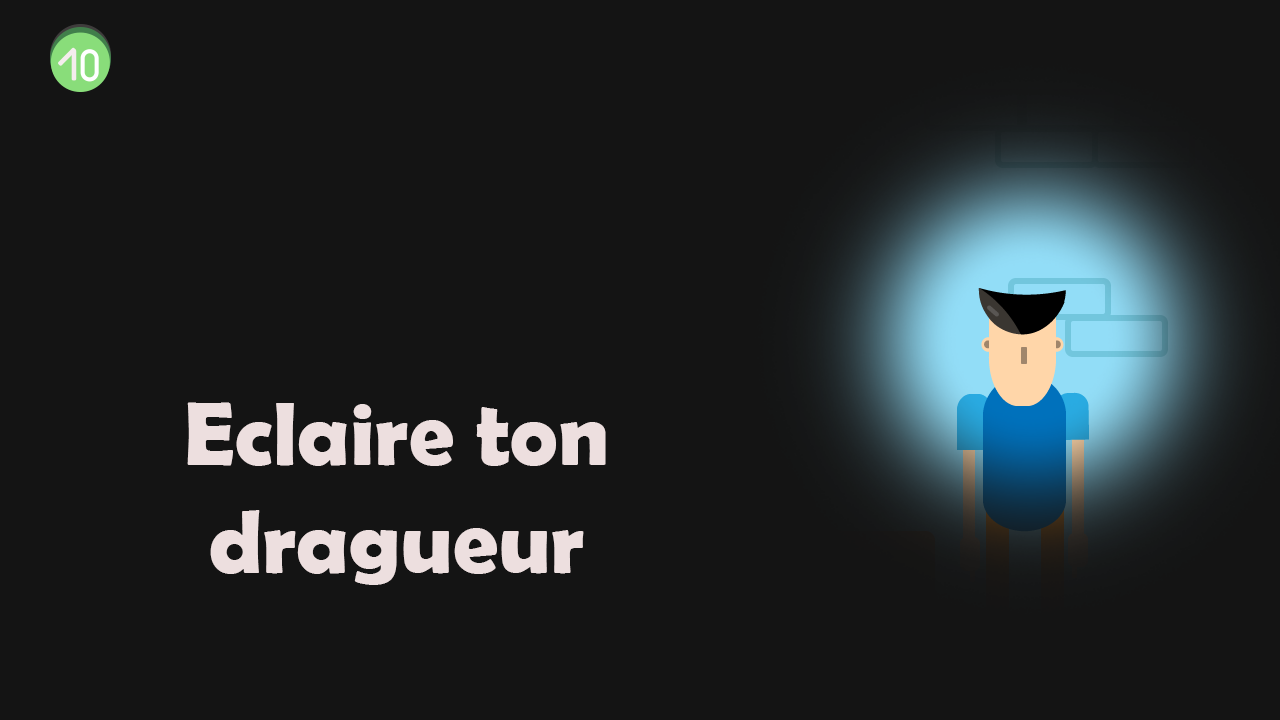
<style>
.page{position:relative;width:1280px;height:720px;background:#141414}
.page>*{position:absolute;margin:0}
.t1{font:90px "BerlinSansFBDemi-Bold";color:#eddfdf}
</style>
<div class="page">
<p class="t1" style="left:187px;top:402px;width:419px;height:183px;text-align:center">Eclaire ton dragueur</p>
</div>
